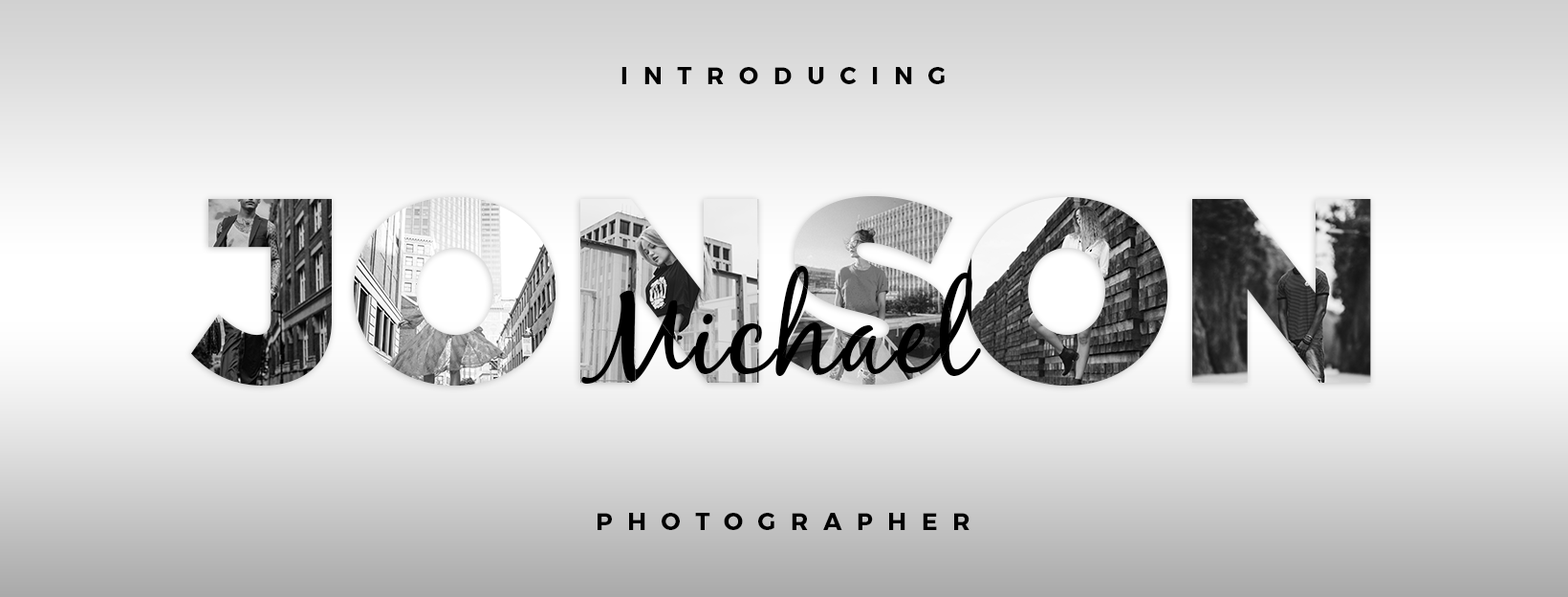
<style>
.page{position:relative;width:1568px;height:597px}
.page>*{position:absolute;margin:0}
.t1{font:23.9px "Montserrat-Bold";letter-spacing:0.63em;color:#000000;text-transform:uppercase}
.t2{font:262px "Montserrat-Black";letter-spacing:0.03em;text-transform:uppercase}
.t3{font:118.6px "BlackJackRegular";letter-spacing:0.03em;color:#000000}
</style>
<div class="page">
<p class="t1" style="left:621px;top:67px;width:324px;height:17px">introducing</p>
<p class="t2" style="left:190px;top:196px;width:1181px;height:190px">JOnson</p>
<p class="t3" style="left:581px;top:266px;width:400px;height:117px">Michael</p>
<p class="t3" style="left:581px;top:266px;width:400px;height:117px">Michael</p>
<p class="t1" style="left:598px;top:512px;width:371px;height:18px">Photographer</p>
</div>
